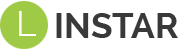
<style>
.page{position:relative;width:180px;height:50px;background:#ffffff}
.page>*{position:absolute;margin:0}
.t1{font:35px "Raleway";color:#ffffff;text-transform:uppercase}
.t2{font:35px "Raleway-Bold";color:#393939;text-transform:uppercase}
</style>
<div class="page">
<p class="t1" style="left:19px;top:11px;width:17px;height:25px">l</p>
<p class="t2" style="left:56px;top:13px;width:122px;height:25px">instar</p>
</div>
